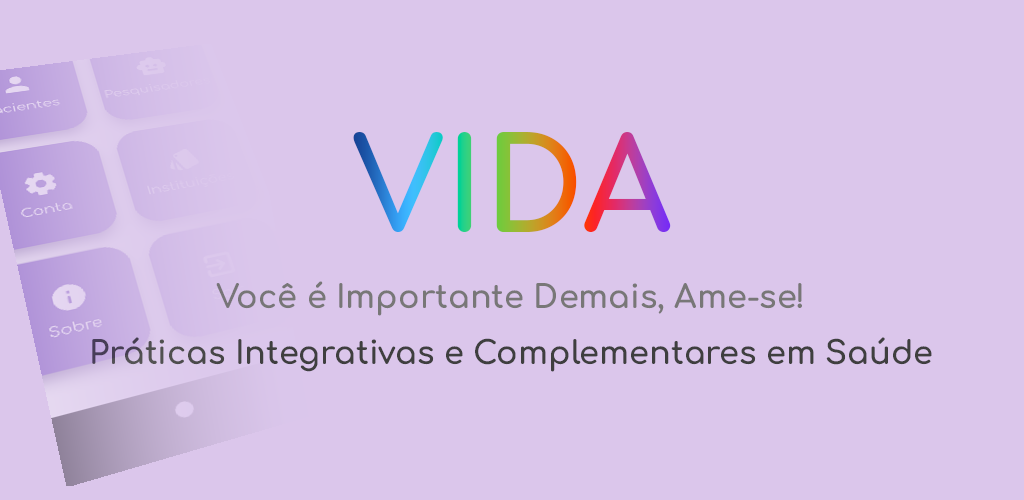
<style>
.page{position:relative;width:1024px;height:500px;background:#dbc6eb}
.page>*{position:absolute;margin:0}
.t1{font:32px/56px "Comfortaa-Bold";color:#3f3f3f}
.t2{font:32px/56px "Comfortaa-Bold";color:#787777}
</style>
<div class="page">
<p class="t1" style="left:92px;top:281px;width:840px;height:91px;text-align:center"><span class="t2">Você é Importante Demais, Ame-se!<br></span>Práticas Integrativas e Complementares em Saúde</p>
</div>
